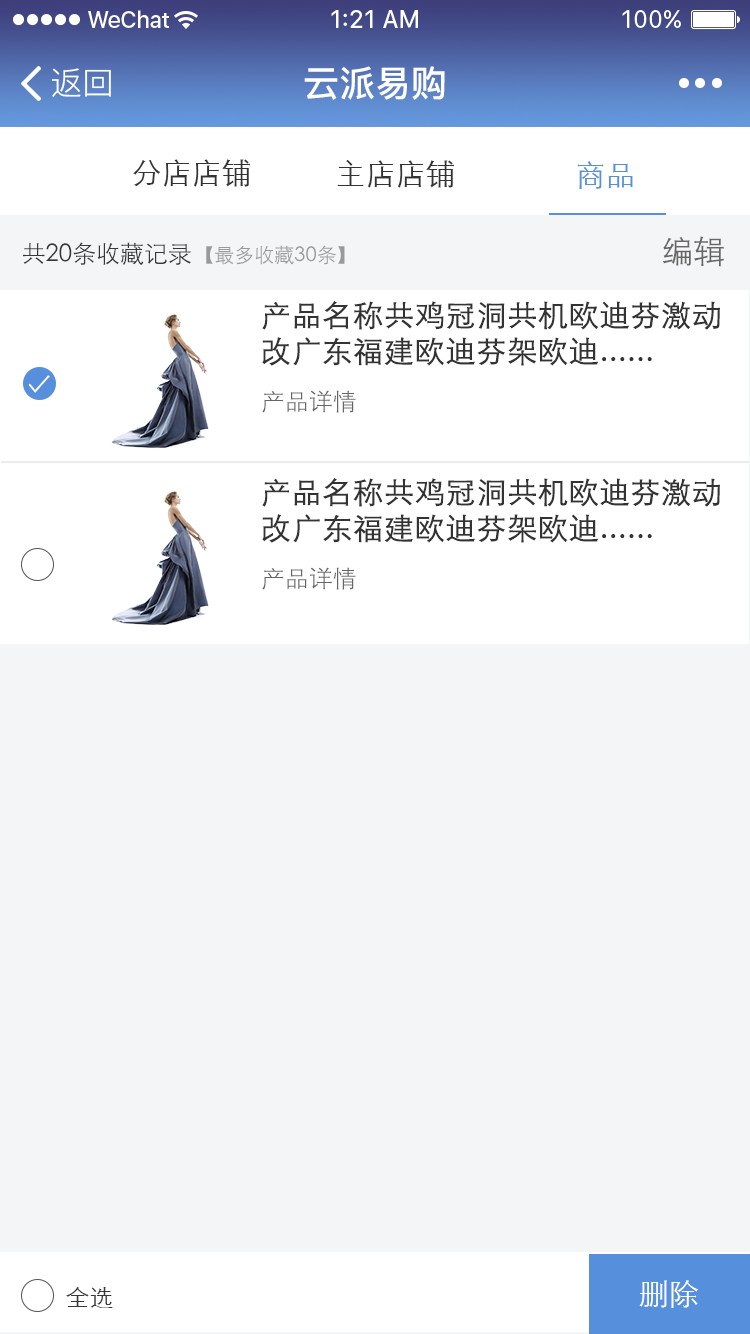
<style>
.page{position:relative;width:750px;height:1334px;background:#f4f5f6}
.page>*{position:absolute;margin:0}
.t1{font:32px "PingFang-SC-Regular";color:#ffffff}
.t2{font:36px "PingFang-SC-Bold";color:#ffffff}
.t3{font:30px "STXihei";color:#333333}
.t4{font:30px "STXihei";color:#568fdc}
.t5{font:24px "STXihei";color:#373737}
.t6{font:20px "STXihei";color:#999999}
.t7{font:32px "STXihei";color:#666666}
.t8{font:30px "STXihei";color:#333333;font-weight:bold}
.t9{font:24px "STXihei";color:#666666}
.t10{font:30px "STXihei";color:#ffffff}
</style>
<div class="page">
<p class="t1" style="left:52px;top:68px;width:59px;height:29px">返回</p>
<p class="t2" style="left:304px;top:66px;width:141px;height:34px">云派易购</p>
<p class="t3" style="left:133px;top:159px;width:117px;height:28px">分店店铺</p>
<p class="t3" style="left:337px;top:160px;width:117px;height:28px">主店店铺</p>
<p class="t4" style="left:577px;top:161px;width:56px;height:28px">商品</p>
<p class="t5" style="left:23px;top:242px;width:168px;height:23px">共20条收藏记录</p>
<p class="t6" style="left:206px;top:245px;width:139px;height:20px">【最多收藏30条】</p>
<p class="t7" style="left:663px;top:236px;width:61px;height:31px">编辑</p>
<p class="t8" style="left:262px;top:301px;width:458px;height:65px">产品名称共鸡冠洞共机欧迪芬激动改广东福建欧迪芬架欧迪......</p>
<p class="t9" style="left:262px;top:390px;width:94px;height:23px">产品详情</p>
<p class="t8" style="left:262px;top:478px;width:458px;height:65px">产品名称共鸡冠洞共机欧迪芬激动改广东福建欧迪芬架欧迪......</p>
<p class="t9" style="left:262px;top:567px;width:94px;height:23px">产品详情</p>
<p class="t5" style="left:66px;top:1287px;width:47px;height:21px">全选</p>
<p class="t10" style="left:639px;top:1280px;width:59px;height:28px">删除</p>
</div>
